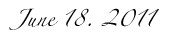
<style>
.page{position:relative;width:169px;height:34px;background:#ffffff}
.page>*{position:absolute;margin:0}
.t1{font:15.3px "Zapfino";color:#000000}
</style>
<div class="page">
<p class="t1" style="left:9px;top:8px;width:150px;height:22px">June 18. 2011</p>
</div>
